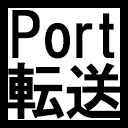
<style>
.page{position:relative;width:128px;height:128px;background:#000000}
.page>*{position:absolute;margin:0}
.t1{font:60px "HGSGothicE";color:#000000}
</style>
<div class="page">
<p class="t1" style="left:12px;top:10px;width:103px;height:49px">Port</p>
<p class="t1" style="left:7px;top:62px;width:116px;height:58px">転送</p>
</div>
